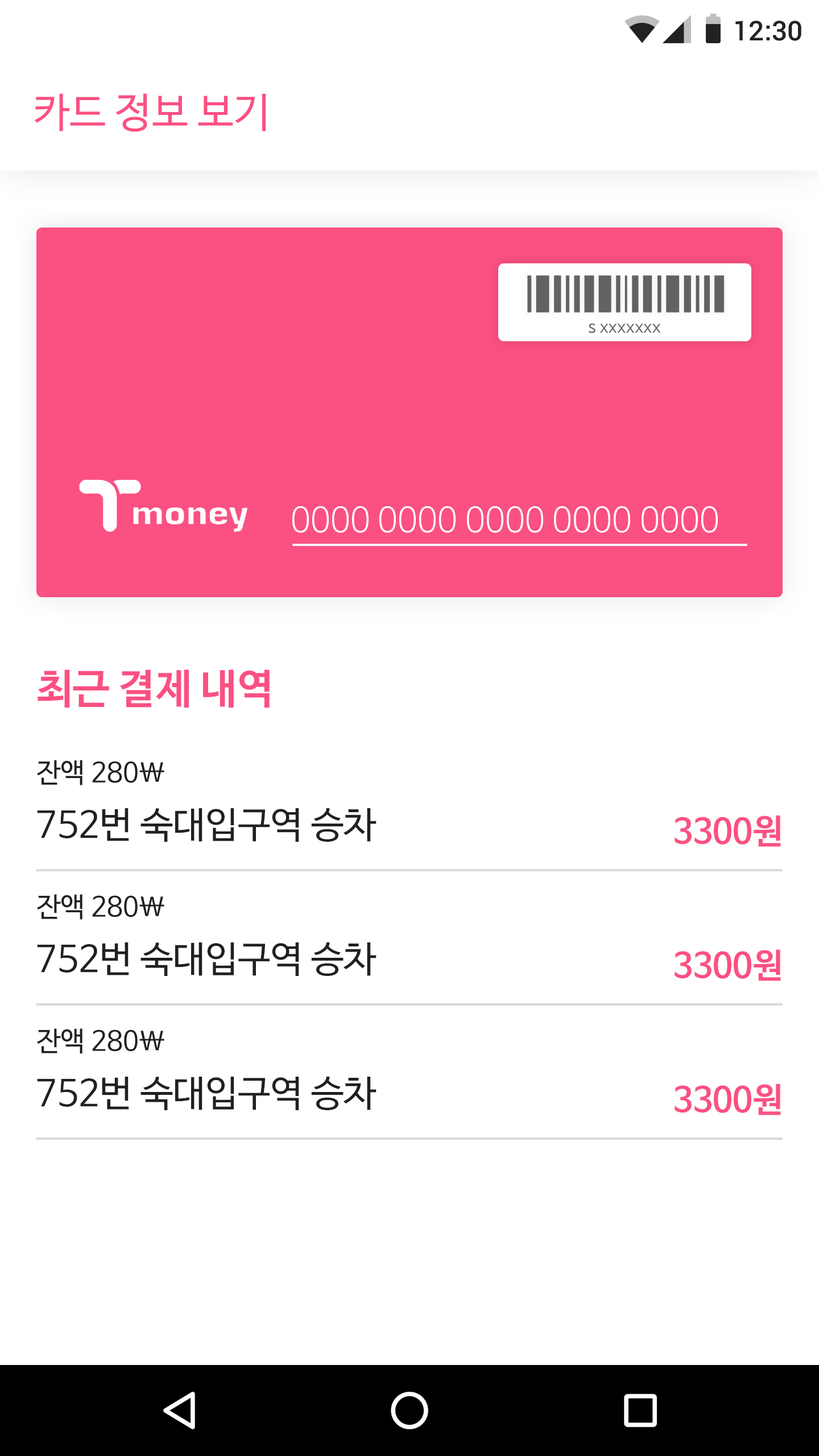
<style>
.page{position:relative;width:819px;height:1456px;background:#ffffff}
.page>*{position:absolute;margin:0}
.t1{font:27.3px "Roboto-Medium";color:#222222}
.t2{font:40.9px "NanumBarunGothic";color:#fb5082}
.t3{font:16.5px "NanumBarunGothic";color:#626262}
.t4{font:34.1px "NanumBarunGothicLight";color:#ffffff}
.t5{font:40.9px "NanumBarunGothicBold";color:#fb5082}
.t6{font:27.3px "NanumBarunGothic";color:#202020}
.t7{font:36.4px "NanumBarunGothic";color:#202020}
.t8{font:34.1px "NanumBarunGothicBold";color:#fb5082}
</style>
<div class="page">
<p class="t1" style="left:735px;top:20px;width:66px;height:21px">12:30</p>
<p class="t2" style="left:34px;top:93px;width:232px;height:39px">카드 정보 보기</p>
<p class="t3" style="left:589px;top:323px;width:72px;height:10px">s xxxxxxx</p>
<p class="t4" style="left:292px;top:506px;width:426px;height:27px">0000 0000 0000 0000 0000</p>
<p class="t5" style="left:38px;top:669px;width:232px;height:39px">최근 결제 내역</p>
<p class="t6" style="left:36px;top:760px;width:128px;height:25px">잔액 280\</p>
<p class="t7" style="left:37px;top:808px;width:340px;height:34px">752번 숙대입구역 승차</p>
<p class="t8" style="left:675px;top:815px;width:106px;height:32px">3300원</p>
<p class="t6" style="left:36px;top:894px;width:128px;height:26px">잔액 280\</p>
<p class="t7" style="left:37px;top:942px;width:340px;height:34px">752번 숙대입구역 승차</p>
<p class="t8" style="left:675px;top:949px;width:106px;height:32px">3300원</p>
<p class="t6" style="left:36px;top:1028px;width:128px;height:26px">잔액 280\</p>
<p class="t7" style="left:37px;top:1077px;width:340px;height:33px">752번 숙대입구역 승차</p>
<p class="t8" style="left:675px;top:1083px;width:106px;height:32px">3300원</p>
</div>
